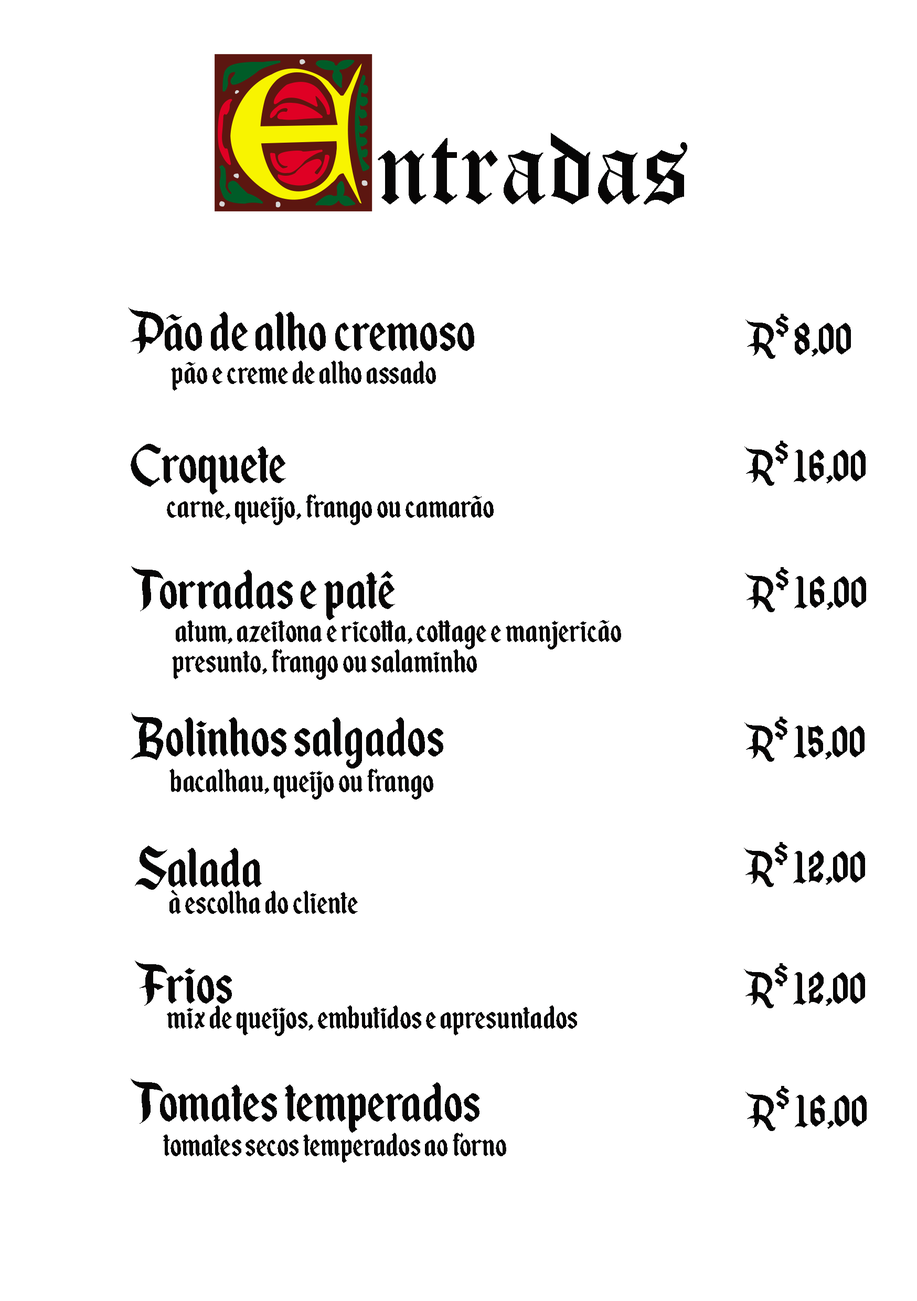
<style>
.page{position:relative;width:917px;height:1301px;background:#ffffff}
.page>*{position:absolute;margin:0}
.t1{font:104.9px "OldEnglishTextMT";color:#070606}
.t2{font:157.3px "Ruritania";color:#070606}
.t3{font:65.6px "EnchantedLand";color:#070606}
.t4{font:52.4px "EnchantedLand";color:#070606}
.t5{font:39.3px "EnchantedLand";color:#070606}
</style>
<div class="page">
<p class="t1" style="left:378px;top:133px;width:309px;height:72px"><span class="t2">       </span>ntradas</p>
<p class="t3" style="left:128px;top:307px;width:346px;height:46px">Pão de alho cremoso</p>
<p class="t4" style="left:745px;top:314px;width:106px;height:45px">R$ 8,00</p>
<p class="t5" style="left:171px;top:360px;width:265px;height:31px">pão e creme de alho assado</p>
<p class="t3" style="left:131px;top:444px;width:155px;height:51px">Croquete</p>
<p class="t4" style="left:744px;top:441px;width:121px;height:45px">R$ 16,00</p>
<p class="t5" style="left:167px;top:494px;width:327px;height:31px">carne, queijo, frango ou camarão</p>
<p class="t3" style="left:131px;top:566px;width:264px;height:54px">Torradas e patê</p>
<p class="t4" style="left:745px;top:567px;width:121px;height:45px">R$ 16,00</p>
<p class="t5" style="left:176px;top:620px;width:445px;height:29px">atum, azeitona e ricotta, cottage e manjericão</p>
<p class="t5" style="left:172px;top:649px;width:305px;height:31px">presunto, frango ou salaminho</p>
<p class="t3" style="left:131px;top:712px;width:312px;height:56px">Bolinhos salgados</p>
<p class="t4" style="left:744px;top:716px;width:120px;height:46px">R$ 15,00</p>
<p class="t5" style="left:169px;top:768px;width:264px;height:31px">bacalhau, queijo ou frango</p>
<p class="t3" style="left:135px;top:845px;width:127px;height:45px">Salada</p>
<p class="t4" style="left:744px;top:842px;width:121px;height:45px">R$ 12,00</p>
<p class="t5" style="left:169px;top:890px;width:189px;height:24px">à escolha do cliente</p>
<p class="t3" style="left:135px;top:960px;width:97px;height:45px">Frios</p>
<p class="t4" style="left:744px;top:963px;width:121px;height:45px">R$ 12,00</p>
<p class="t5" style="left:167px;top:1005px;width:410px;height:31px">mix de queijos, embutidos e apresuntados</p>
<p class="t3" style="left:131px;top:1078px;width:348px;height:54px">Tomates temperados</p>
<p class="t4" style="left:745px;top:1086px;width:121px;height:45px">R$ 16,00</p>
<p class="t5" style="left:163px;top:1132px;width:343px;height:31px">tomates secos temperados ao forno</p>
</div>
